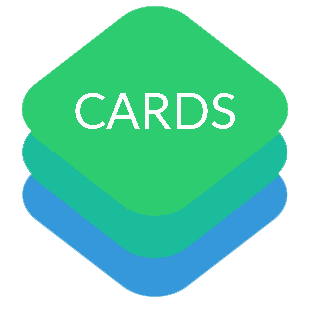
<style>
.page{position:relative;width:310px;height:309px;background:#ffffff}
.page>*{position:absolute;margin:0}
.t1{font:50px "Lato-Regular";color:#ffffff;text-transform:uppercase}
</style>
<div class="page">
<p class="t1" style="left:75px;top:93px;width:160px;height:36px">CARDS</p>
</div>
